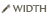
<style>
.page{position:relative;width:48px;height:16px;background:#ffffff}
.page>*{position:absolute;margin:0}
.t1{font:10px "AmiraParadiso";color:#6a685a}
</style>
<div class="page">
<p class="t1" style="left:12px;top:5px;width:35px;height:7px">WIDTH</p>
</div>
